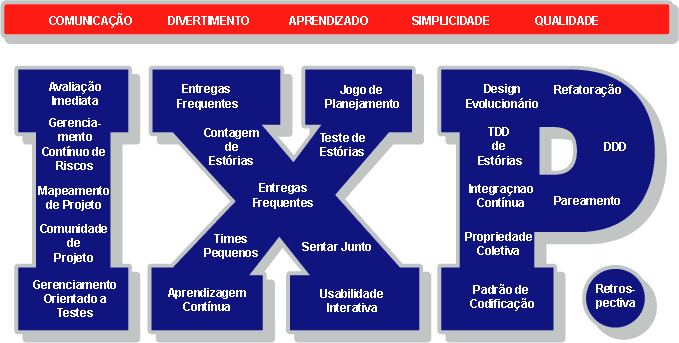
<style>
.page{position:relative;width:679px;height:343px;background:#10147e}
.page>*{position:absolute;margin:0}
.t1{font:12px "Arial-BoldMT";letter-spacing:-0.02em;color:#ffffff}
</style>
<div class="page">
<p class="t1" style="left:49px;top:13px;width:83px;height:15px">COMUNICAÇÃO</p>
<p class="t1" style="left:168px;top:16px;width:81px;height:9px">DIVERTIMENTO</p>
<p class="t1" style="left:289px;top:16px;width:79px;height:9px">APRENDIZADO</p>
<p class="t1" style="left:412px;top:16px;width:77px;height:9px">SIMPLICIDADE</p>
<p class="t1" style="left:535px;top:16px;width:63px;height:10px">QUALIDADE</p>
<p class="t1" style="left:49px;top:81px;width:52px;height:24px;text-align:center">Avaliação<br>Imediata</p>
<p class="t1" style="left:177px;top:84px;width:61px;height:26px;text-align:center">Entregas <br>Frequentes</p>
<p class="t1" style="left:325px;top:85px;width:74px;height:25px;text-align:center">Jogo de <br>Planejamento</p>
<p class="t1" style="left:466px;top:84px;width:72px;height:24px;text-align:center">Design<br>Evolucionário</p>
<p class="t1" style="left:554px;top:84px;width:67px;height:13px">Refatoração</p>
<p class="t1" style="left:42px;top:118px;width:63px;height:52px;text-align:center">Gerencia-<br>mento<br>Contínuo de <br>Riscos</p>
<p class="t1" style="left:204px;top:128px;width:55px;height:37px;text-align:center">Contagem<br>de<br>Estórias</p>
<p class="t1" style="left:320px;top:133px;width:45px;height:23px;text-align:center">Teste de<br>Estórias</p>
<p class="t1" style="left:478px;top:127px;width:44px;height:38px;text-align:center">TDD <br>de <br>Estórias</p>
<p class="t1" style="left:604px;top:142px;width:22px;height:9px">DDD</p>
<p class="t1" style="left:253px;top:183px;width:60px;height:26px;text-align:center">Entregas<br>Frequentes</p>
<p class="t1" style="left:469px;top:184px;width:64px;height:23px;text-align:center">Integraçnao<br>Contínua</p>
<p class="t1" style="left:38px;top:186px;width:71px;height:25px;text-align:center">Mapeamento<br>de Projeto</p>
<p class="t1" style="left:554px;top:196px;width:66px;height:9px">Pareamento</p>
<p class="t1" style="left:40px;top:224px;width:67px;height:40px;text-align:center">Comunidade<br>de<br>Projeto</p>
<p class="t1" style="left:465px;top:232px;width:67px;height:23px;text-align:center">Propriedade<br>Coletiva</p>
<p class="t1" style="left:204px;top:234px;width:54px;height:25px;text-align:center">Times<br>Pequenos</p>
<p class="t1" style="left:302px;top:242px;width:69px;height:9px">Sentar Junto</p>
<p class="t1" style="left:33px;top:280px;width:83px;height:37px;text-align:center">Gerenciamento<br>Orientado a<br>Testes</p>
<p class="t1" style="left:168px;top:288px;width:78px;height:23px;text-align:center">Aprendizagem<br>Contínua</p>
<p class="t1" style="left:320px;top:289px;width:63px;height:23px;text-align:center">Usabilidade<br>Interativa</p>
<p class="t1" style="left:470px;top:284px;width:64px;height:27px;text-align:center">Padrão de <br>Codificação</p>
<p class="t1" style="left:596px;top:284px;width:39px;height:25px;text-align:center">Retros-<br>pectiva</p>
</div>
